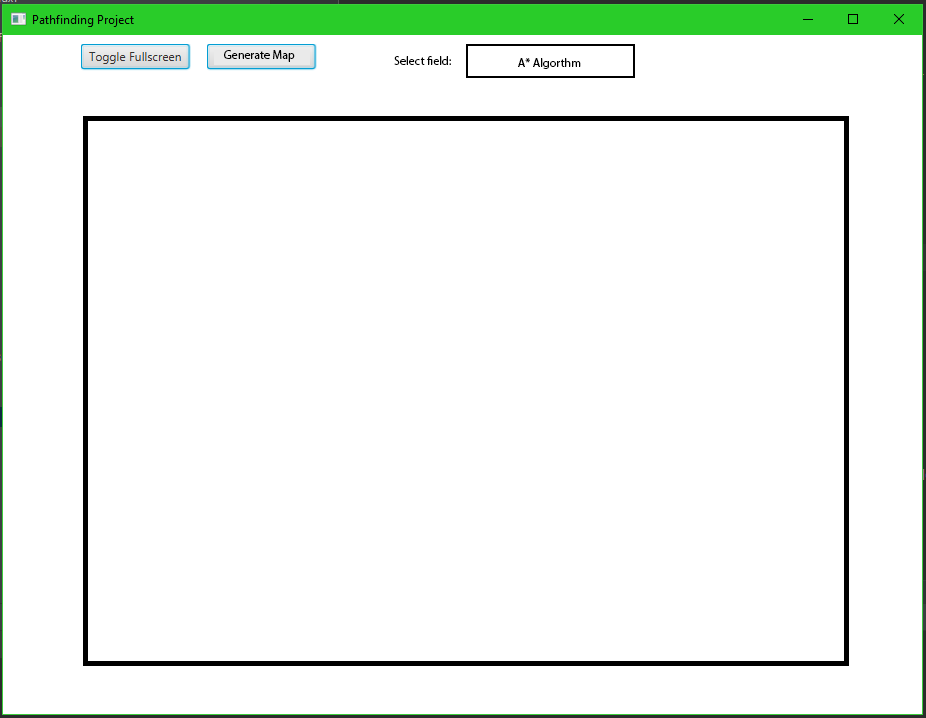
<style>
.page{position:relative;width:926px;height:718px;background:#ffffff}
.page>*{position:absolute;margin:0}
.t1{font:12px "MyriadPro-Regular";color:#000000}
</style>
<div class="page">
<p class="t1" style="left:224px;top:50px;width:71px;height:12px">Generate Map</p>
<p class="t1" style="left:394px;top:56px;width:57px;height:9px">Select field:</p>
<p class="t1" style="left:518px;top:58px;width:63px;height:11px">A* Algorthm</p>
</div>
